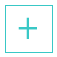
<style>
.page{position:relative;width:57px;height:57px;background:#ffffff}
.page>*{position:absolute;margin:0}
.t1{font:40px "MyriadPro-Regular";letter-spacing:-0.01em;color:#39c8c6;scale:0.9 1}
</style>
<div class="page">
<p class="t1" style="left:18px;top:17px;width:19px;height:22px">+</p>
</div>
